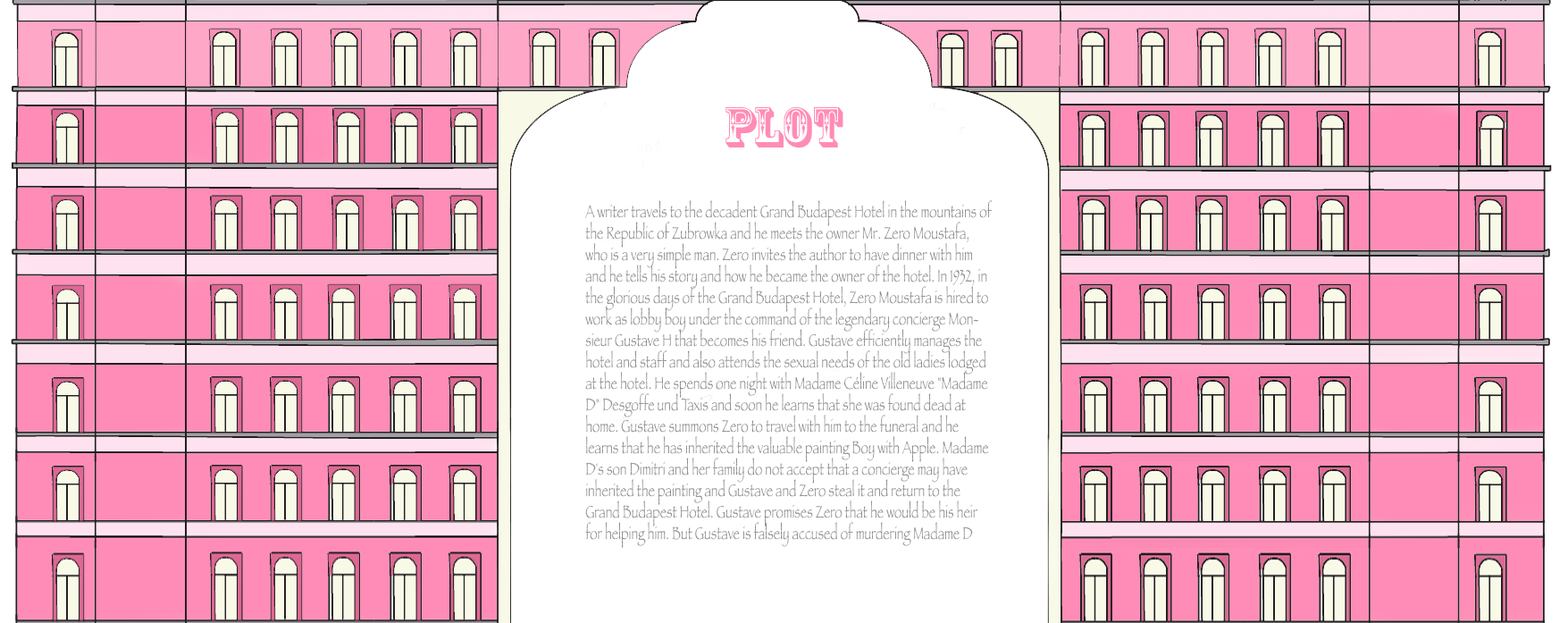
<style>
.page{position:relative;width:1568px;height:623px;background:#ffffff}
.page>*{position:absolute;margin:0}
.t1{font:53.6px "RosewoodStd-Regular";color:#ff8cb6}
.t2{font:17.9px "Papyrus-Condensed";color:#8d8d8d}
</style>
<div class="page">
<p class="t1" style="left:725px;top:106px;width:118px;height:42px">PLOT</p>
<p class="t2" style="left:585px;top:200px;width:408px;height:348px">A writer travels to the decadent Grand Budapest Hotel in the mountains of the Republic of Zubrowka and he meets the owner Mr. Zero Moustafa, who is a very simple man. Zero invites the author to have dinner with him and he tells his story and how he became the owner of the hotel. In 1932, in the glorious days of the Grand Budapest Hotel, Zero Moustafa is hired to work as lobby boy under the command of the legendary concierge Monsieur Gustave H that becomes his friend. Gustave efficiently manages the hotel and staff and also attends the sexual needs of the old ladies lodged at the hotel. He spends one night with Madame Céline Villeneuve "Madame D" Desgoffe und Taxis and soon he learns that she was found dead at home. Gustave summons Zero to travel with him to the funeral and he learns that he has inherited the valuable painting Boy with Apple. Madame D's son Dimitri and her family do not accept that a concierge may have inherited the painting and Gustave and Zero steal it and return to the Grand Budapest Hotel. Gustave promises Zero that he would be his heir for helping him. But Gustave is falsely accused of murdering Madame D and is arrested and imprisoned. Will his friend Zero leave him die in the prison?</p>
</div>
